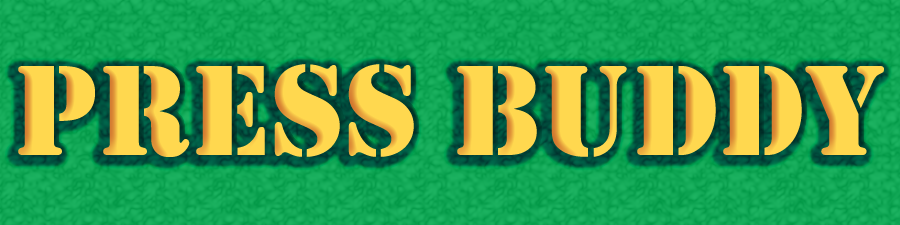
<style>
.page{position:relative;width:900px;height:225px}
.page>*{position:absolute;margin:0}
.t1{font:133.3px "Stencil";color:#ffd84f}
</style>
<div class="page">
<p class="t1" style="left:18px;top:64px;width:866px;height:93px">Press buddy</p>
</div>
